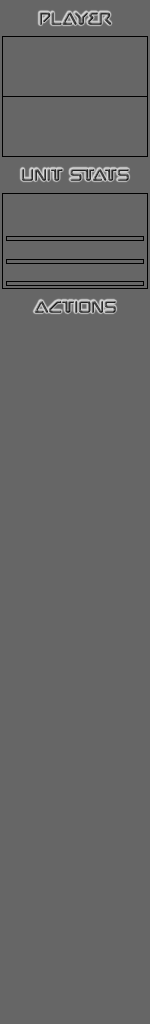
<style>
.page{position:relative;width:150px;height:1024px;background:#666666}
.page>*{position:absolute;margin:0}
.t1{font:19px "Chilopod-Regular"}
.t2{font:18px "Chilopod-Regular"}
</style>
<div class="page">
<p class="t1" style="left:39px;top:12px;width:73px;height:13px">Player</p>
<p class="t2" style="left:21px;top:168px;width:108px;height:13px">Unit stats</p>
<p class="t2" style="left:34px;top:300px;width:82px;height:13px">Actions</p>
</div>
